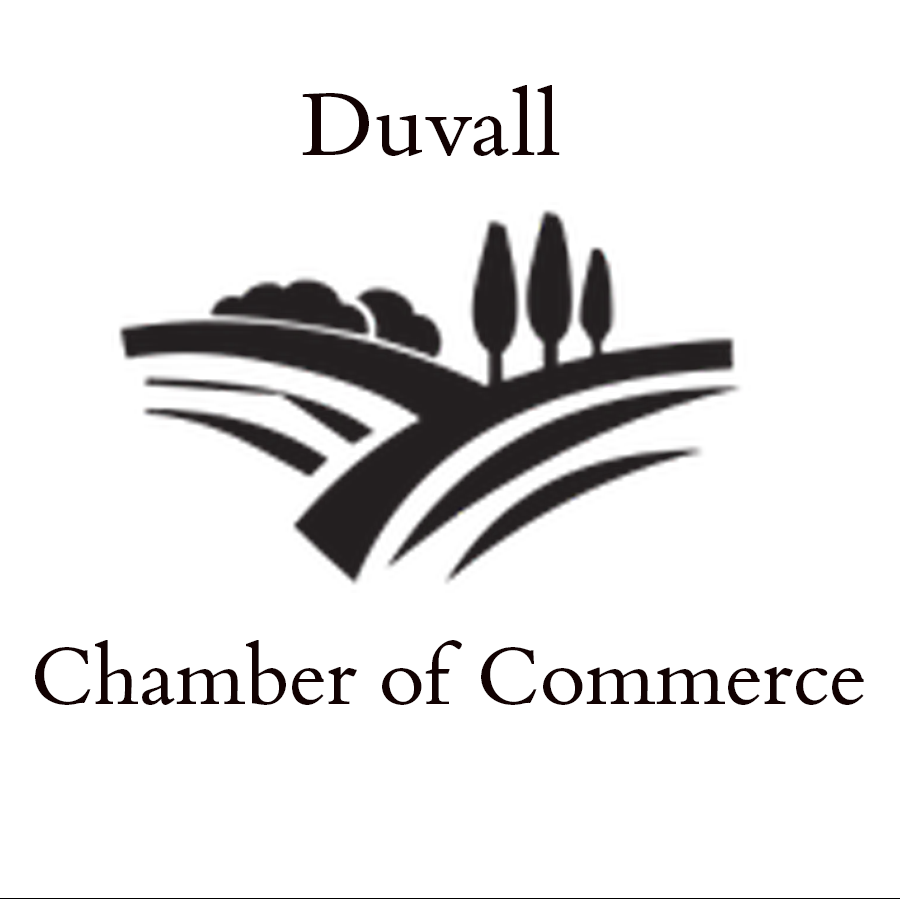
<style>
.page{position:relative;width:900px;height:900px;background:#ffffff}
.page>*{position:absolute;margin:0}
.t1{font:100px "BemboBookMTPro-Regular";color:#120202}
.t2{font:91.7px "BemboBookMTPro-Regular";color:#120202}
</style>
<div class="page">
<p class="t1" style="left:302px;top:85px;width:258px;height:71px">Duvall</p>
<p class="t2" style="left:35px;top:640px;width:829px;height:65px">Chamber of Commerce</p>
</div>
